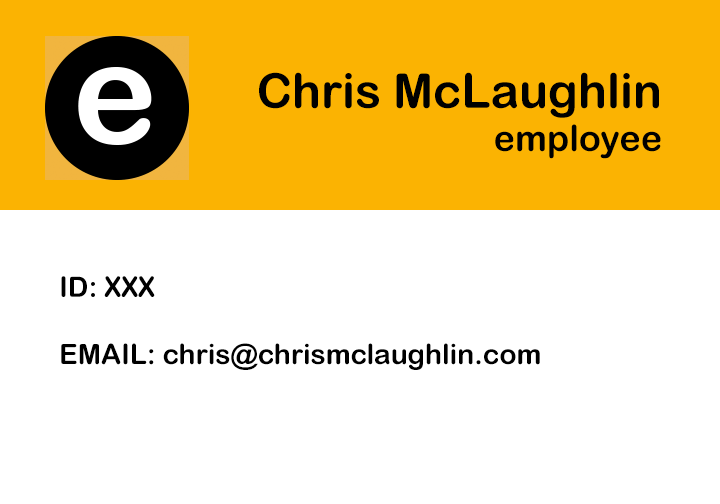
<style>
.page{position:relative;width:720px;height:504px;background:#ffffff}
.page>*{position:absolute;margin:0}
.t1{font:48px "ArialRoundedMTBold";color:#000000}
.t2{font:36px "ArialRoundedMTBold";color:#000000}
.t3{font:28px "ArialRoundedMTBold";color:#000000}
</style>
<div class="page">
<p class="t1" style="left:259px;top:72px;width:402px;height:87px;text-align:right">Chris McLaughlin<br><span class="t2">employee</span></p>
<p class="t3" style="left:61px;top:276px;width:479px;height:94px">ID: XXX <br><br>EMAIL: chris@chrismclaughlin.com</p>
</div>
